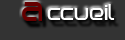
<style>
.page{position:relative;width:125px;height:40px;background:#333333}
.page>*{position:absolute;margin:0}
.t1{font:20px "BirdmanBold";color:#ffffff}
.t2{font:30px "BirdmanBold";color:#650000}
</style>
<div class="page">
<p class="t1" style="left:22px;top:2px;width:93px;height:19px"><span class="t2">a </span>ccueil</p>
</div>
